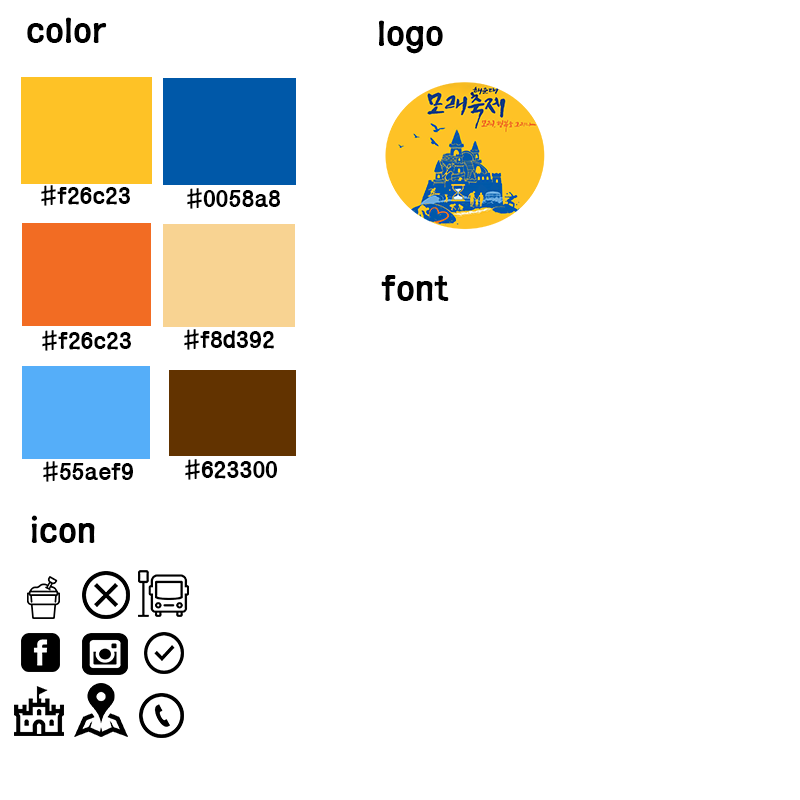
<style>
.page{position:relative;width:800px;height:800px;background:#ffffff}
.page>*{position:absolute;margin:0}
.t1{font:36px "ÈÞ¸Õ¿¾Ã¼";color:#000000}
.t2{font:24px "ÈÞ¸Õ¿¾Ã¼";color:#000000}
</style>
<div class="page">
<p class="t1" style="left:27px;top:17px;width:80px;height:26px">color</p>
<p class="t1" style="left:379px;top:20px;width:64px;height:34px">logo</p>
<p class="t2" style="left:41px;top:185px;width:89px;height:21px">#f26c23</p>
<p class="t2" style="left:187px;top:188px;width:93px;height:21px">#0058a8</p>
<p class="t1" style="left:381px;top:275px;width:68px;height:26px">font</p>
<p class="t2" style="left:184px;top:329px;width:90px;height:21px">#f8d392</p>
<p class="t2" style="left:42px;top:330px;width:89px;height:21px">#f26c23</p>
<p class="t2" style="left:43px;top:461px;width:90px;height:21px">#55aef9</p>
<p class="t2" style="left:185px;top:459px;width:92px;height:21px">#623300</p>
<p class="t1" style="left:31px;top:515px;width:64px;height:28px">icon</p>
</div>
